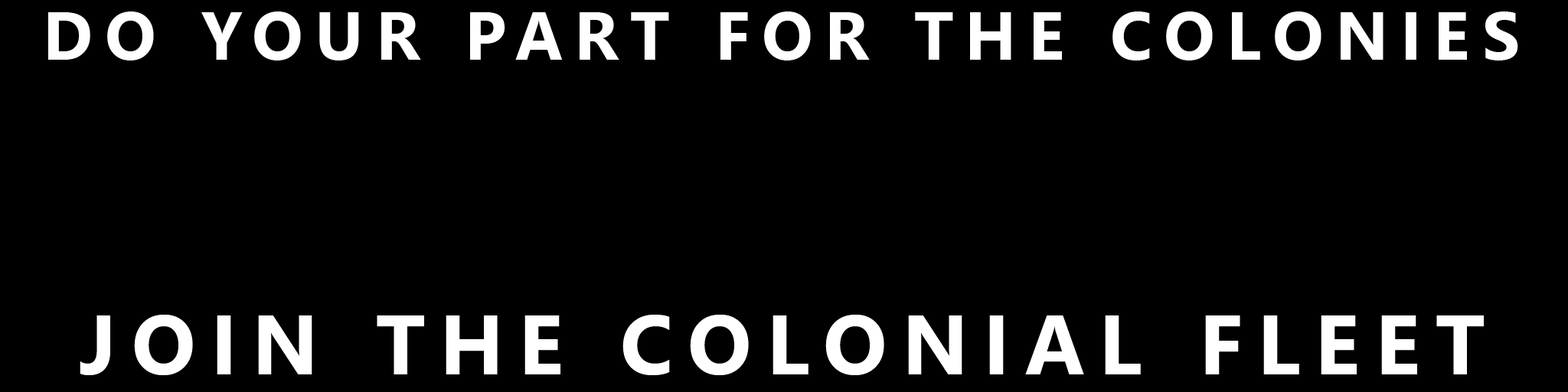
<style>
.page{position:relative;width:1568px;height:392px;background:#000000}
.page>*{position:absolute;margin:0}
.t1{font:67.4px "SegoeUI-Bold";letter-spacing:0.2em;color:#ffffff}
.t2{font:84.2px "SegoeUI-Bold";letter-spacing:0.2em;color:#ffffff}
</style>
<div class="page">
<p class="t1" style="left:48px;top:11px;width:1470px;height:49px">DO YOUR PART FOR THE COLONIES</p>
<p class="t2" style="left:80px;top:315px;width:1404px;height:60px">JOIN THE COLONIAL FLEET</p>
</div>
